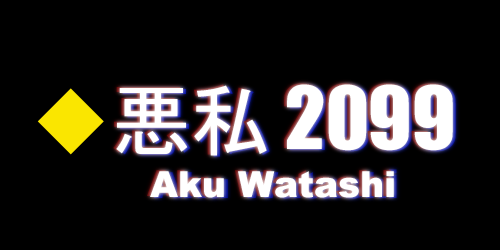
<style>
.page{position:relative;width:500px;height:250px;background:#000000}
.page>*{position:absolute;margin:0}
.t1{font:80px "Impact";color:#ffffff}
.t2{font:80px "MS-Gothic";color:#ffffff}
.t3{font:36px "Arial-Black"}
.t4{font:36px "Arial-Black";color:#ffffff}
.t5{font:36px "Impact"}
</style>
<div class="page">
<p class="t1" style="left:113px;top:83px;width:337px;height:72px"><span class="t2">悪私</span> 2099</p>
<p class="t1" style="left:116px;top:84px;width:337px;height:72px"><span class="t2">悪私</span> 2099</p>
<p class="t1" style="left:119px;top:85px;width:337px;height:72px"><span class="t2">悪私</span> 2099</p>
<p class="t3" style="left:147px;top:170px;width:244px;height:27px">Aku Watashi</p>
<p class="t4" style="left:150px;top:171px;width:244px;height:27px">Aku Watashi</p>
<p class="t3" style="left:154px;top:169px;width:243px;height:30px">Aku Watash<span class="t5">i</span></p>
</div>
